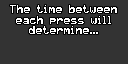
<style>
.page{position:relative;width:128px;height:64px;background:#333333}
.page>*{position:absolute;margin:0}
.t1{font:9px "pixelmix";color:#ffffff}
</style>
<div class="page">
<p class="t1" style="left:10px;top:5px;width:107px;height:29px;text-align:center">The time between each press will determine...</p>
</div>
